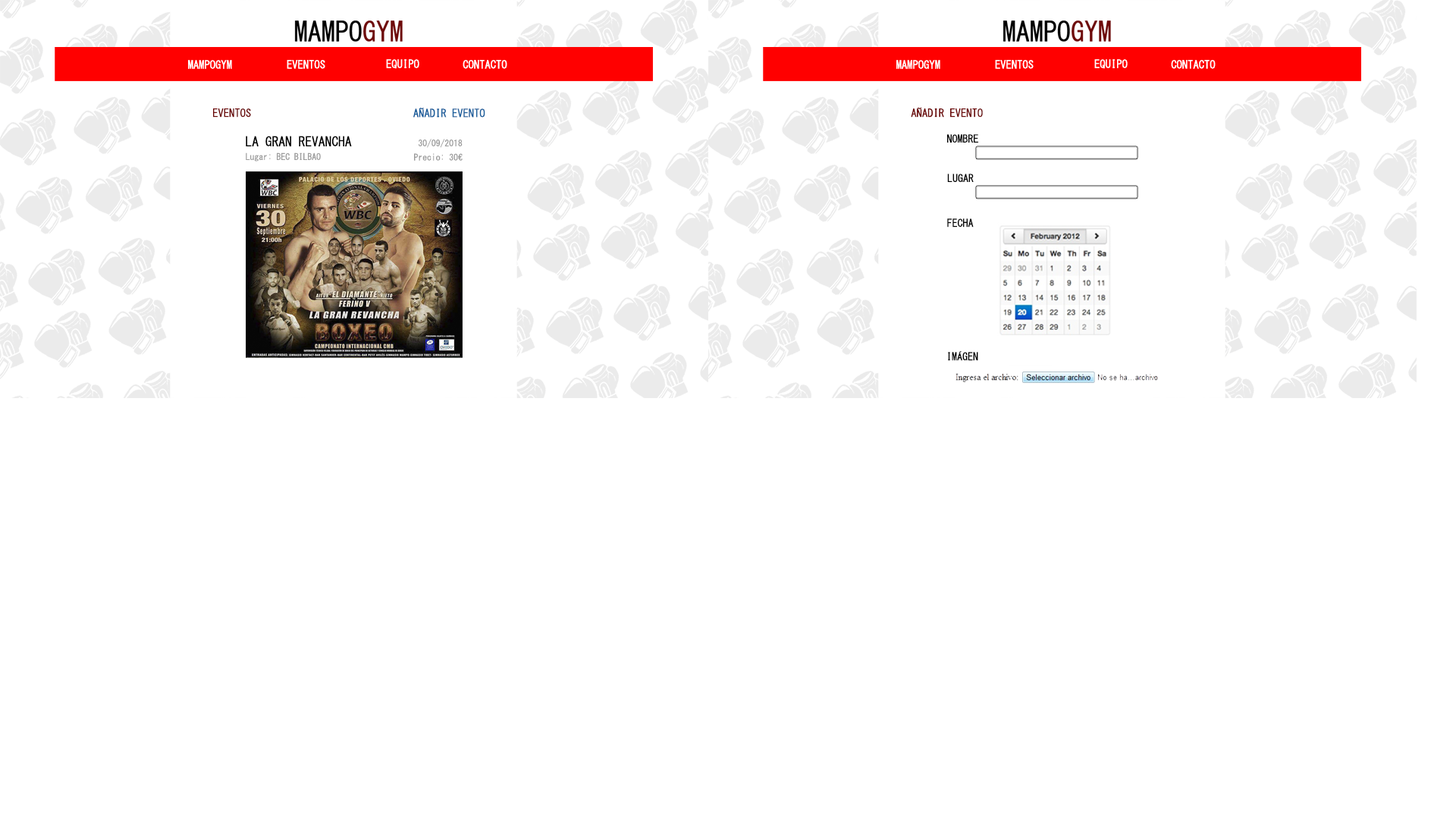
<style>
.page{position:relative;width:1456px;height:819px;background:#ffffff}
.page>*{position:absolute;margin:0}
.t1{font:11.1px "MS-Gothic";color:#ffffff}
.t2{font:11.1px "MS-Gothic";color:#6d0a0a}
.t3{font:11.1px "MS-Gothic";color:#175d9b}
.t4{font:13.3px "MS-Gothic";color:#000000}
.t5{font:10.6px "MS-Gothic";color:#000000}
.t6{font:8.8px "MS-Gothic";color:#9c9c9c}
</style>
<div class="page">
<p class="t1" style="left:188px;top:60px;width:44px;height:9px">MAMPOGYM</p>
<p class="t1" style="left:287px;top:60px;width:38px;height:9px">EVENTOS</p>
<p class="t1" style="left:386px;top:59px;width:33px;height:10px">EQUIPO</p>
<p class="t1" style="left:463px;top:60px;width:44px;height:9px">CONTACTO</p>
<p class="t1" style="left:896px;top:60px;width:44px;height:9px">MAMPOGYM</p>
<p class="t1" style="left:995px;top:60px;width:39px;height:9px">EVENTOS</p>
<p class="t1" style="left:1094px;top:59px;width:34px;height:10px">EQUIPO</p>
<p class="t1" style="left:1171px;top:60px;width:45px;height:9px">CONTACTO</p>
<p class="t2" style="left:213px;top:108px;width:38px;height:10px">EVENTOS</p>
<p class="t3" style="left:413px;top:108px;width:72px;height:10px">AÑADIR EVENTO</p>
<p class="t2" style="left:911px;top:107px;width:72px;height:11px">AÑADIR EVENTO</p>
<p class="t4" style="left:246px;top:136px;width:106px;height:10px">LA GRAN REVANCHA</p>
<p class="t5" style="left:947px;top:134px;width:31px;height:9px">NOMBRE</p>
<p class="t6" style="left:418px;top:139px;width:45px;height:9px">30/09/2018</p>
<p class="t6" style="left:246px;top:152px;width:75px;height:10px">Lugar: BEC BILBAO</p>
<p class="t6" style="left:414px;top:153px;width:49px;height:8px">Precio: 30€</p>
<p class="t5" style="left:947px;top:174px;width:27px;height:8px">LUGAR</p>
<p class="t5" style="left:947px;top:218px;width:27px;height:9px">FECHA</p>
<p class="t5" style="left:948px;top:351px;width:30px;height:10px">IMÁGEN</p>
</div>
